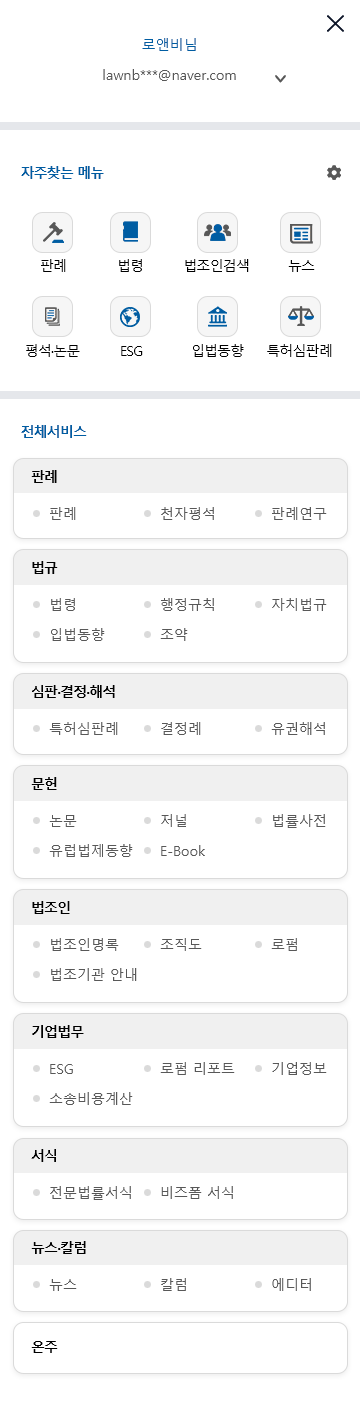
<style>
.page{position:relative;width:360px;height:1418px;background:#ffffff}
.page>*{position:absolute;margin:0}
.t1{font:14px/30px "MalgunGothic"}
.t2{font:14px "MalgunGothicBold";letter-spacing:-0.06em;color:#005da2}
.t3{font:14px "MalgunGothic";letter-spacing:-0.06em;color:#000000}
.t4{font:14px "MalgunGothicBold";letter-spacing:-0.06em;color:#000000}
.t5{font:14px "MalgunGothic";color:#585858}
.t6{font:14px/30px "MalgunGothic";color:#585858}
</style>
<div class="page">
<p class="t1" style="left:90px;top:38px;width:154px;height:133px;text-align:center">로앤비님<br>lawnb***@naver.com<br>개인회원  |  Professional <br>2100-12-31 까지<br>나의모바일기기 삭제</p>
<p class="t2" style="left:21px;top:166px;width:83px;height:13px">자주찾는 메뉴</p>
<p class="t3" style="left:41px;top:259px;width:25px;height:13px">판례</p>
<p class="t3" style="left:119px;top:259px;width:23px;height:13px">법령</p>
<p class="t3" style="left:185px;top:259px;width:64px;height:13px">법조인검색</p>
<p class="t3" style="left:288px;top:260px;width:27px;height:12px">뉴스</p>
<p class="t3" style="left:26px;top:344px;width:54px;height:13px">평석·논문</p>
<p class="t3" style="left:121px;top:346px;width:22px;height:10px">ESG</p>
<p class="t3" style="left:193px;top:344px;width:51px;height:13px">입법동향</p>
<p class="t3" style="left:267px;top:344px;width:65px;height:13px">특허심판례</p>
<p class="t2" style="left:21px;top:425px;width:66px;height:13px">전체서비스</p>
<p class="t4" style="left:31px;top:470px;width:26px;height:13px">판례</p>
<p class="t5" style="left:50px;top:507px;width:26px;height:13px">판례</p>
<p class="t5" style="left:161px;top:507px;width:53px;height:13px">천자평석</p>
<p class="t5" style="left:272px;top:507px;width:55px;height:13px">판례연구</p>
<p class="t4" style="left:32px;top:561px;width:26px;height:13px">법규</p>
<p class="t6" style="left:51px;top:598px;width:54px;height:43px">법령<br>입법동향</p>
<p class="t6" style="left:160px;top:598px;width:54px;height:43px">행정규칙<br>조약</p>
<p class="t5" style="left:272px;top:598px;width:55px;height:13px">자치법규​</p>
<p class="t4" style="left:32px;top:685px;width:83px;height:13px">심판·결정·해석</p>
<p class="t6" style="left:49px;top:722px;width:69px;height:13px">특허심판례<br>​</p>
<p class="t5" style="left:161px;top:722px;width:40px;height:13px">결정례</p>
<p class="t5" style="left:271px;top:722px;width:54px;height:13px">유권해석​</p>
<p class="t4" style="left:31px;top:777px;width:26px;height:13px">문헌</p>
<p class="t6" style="left:49px;top:815px;width:84px;height:42px">논문<br>유럽법제동향</p>
<p class="t6" style="left:161px;top:814px;width:44px;height:42px">저널<br>E-Book</p>
<p class="t5" style="left:273px;top:814px;width:53px;height:14px">법률사전​</p>
<p class="t4" style="left:32px;top:901px;width:38px;height:13px">법조인</p>
<p class="t6" style="left:51px;top:938px;width:86px;height:43px">법조인명록<br>법조기관 안내</p>
<p class="t5" style="left:160px;top:938px;width:42px;height:13px">조직도</p>
<p class="t5" style="left:271px;top:938px;width:26px;height:13px">로펌​</p>
<p class="t4" style="left:32px;top:1025px;width:52px;height:13px">기업법무</p>
<p class="t5" style="left:160px;top:1062px;width:75px;height:13px">로펌 리포트</p>
<p class="t5" style="left:272px;top:1062px;width:55px;height:13px">기업정보​</p>
<p class="t6" style="left:49px;top:1064px;width:84px;height:41px">ESG<br>소송비용계산</p>
<p class="t4" style="left:31px;top:1149px;width:25px;height:13px">서식</p>
<p class="t5" style="left:50px;top:1186px;width:81px;height:14px">전문법률서식</p>
<p class="t5" style="left:161px;top:1186px;width:72px;height:13px">비즈폼 서식</p>
<p class="t4" style="left:31px;top:1241px;width:55px;height:13px">뉴스·칼럼</p>
<p class="t5" style="left:161px;top:1278px;width:25px;height:13px">칼럼</p>
<p class="t5" style="left:272px;top:1278px;width:39px;height:13px">에디터</p>
<p class="t5" style="left:49px;top:1279px;width:28px;height:12px">뉴스</p>
<p class="t4" style="left:31px;top:1341px;width:27px;height:12px">온주</p>
</div>
